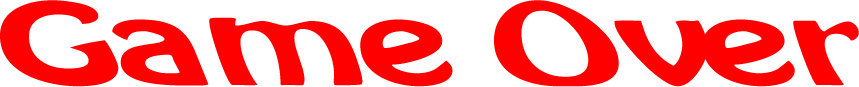
<style>
.page{position:relative;width:859px;height:87px;background:#ffffff}
.page>*{position:absolute;margin:0}
.t1{font:100px "Microdot";color:#ff0000}
.t2{font:100px "StarlinerBTNBoldOblique";color:#ff0000}
</style>
<div class="page">
<p class="t1" style="left:0px;top:0px;width:859px;height:87px"><span class="t2"><br><br></span>Game Over</p>
</div>
